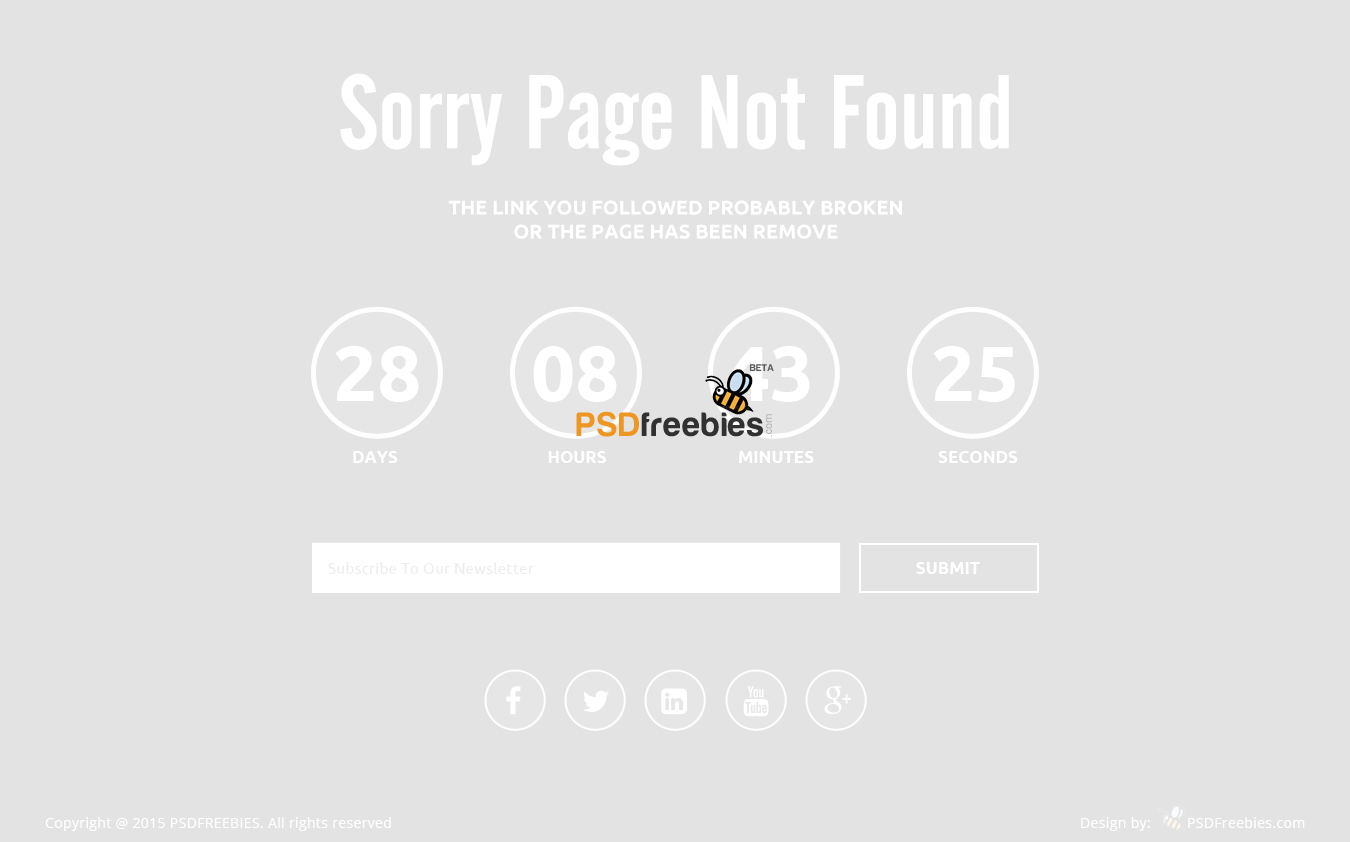
<style>
.page{position:relative;width:1350px;height:842px;background:#e3e3e3}
.page>*{position:absolute;margin:0}
.t1{font:103.4px "AlternateGothicNo2BT-Regular";color:#ffffff}
.t2{font:20px "Ubuntu-Bold";color:#ffffff;text-transform:uppercase}
.t3{font:78.3px "Ubuntu-Bold";color:#ffffff;text-transform:uppercase}
.t4{font:17px "Ubuntu-Bold";color:#ffffff;text-transform:uppercase}
.t5{font:15px "Ubuntu";letter-spacing:0.025em;color:#ededed}
.t6{font:14px "OpenSans";letter-spacing:0.025em;color:#ffffff}
</style>
<div class="page">
<p class="t1" style="left:340px;top:73px;width:669px;height:93px">Sorry Page Not Found</p>
<p class="t2" style="left:448px;top:200px;width:454px;height:39px;text-align:center">The Link you followed probably broken<br>or the page has been remove</p>
<p class="t3" style="left:335px;top:346px;width:84px;height:56px">28</p>
<p class="t3" style="left:533px;top:346px;width:84px;height:56px">08</p>
<p class="t3" style="left:933px;top:346px;width:82px;height:56px">25</p>
<p class="t4" style="left:353px;top:451px;width:45px;height:12px">Days</p>
<p class="t4" style="left:548px;top:451px;width:58px;height:12px">Hours</p>
<p class="t4" style="left:739px;top:451px;width:75px;height:12px">Minutes</p>
<p class="t4" style="left:938px;top:451px;width:80px;height:12px">Seconds</p>
<p class="t5" style="left:328px;top:562px;width:206px;height:12px">Subscribe To Our Newsletter</p>
<p class="t4" style="left:916px;top:562px;width:64px;height:12px">Submit</p>
<p class="t6" style="left:45px;top:817px;width:346px;height:14px">Copyright @ 2015 PSDFREEBIES. All rights reserved</p>
<p class="t6" style="left:1081px;top:817px;width:224px;height:14px">Design by:         PSDFreebies.com</p>
</div>
